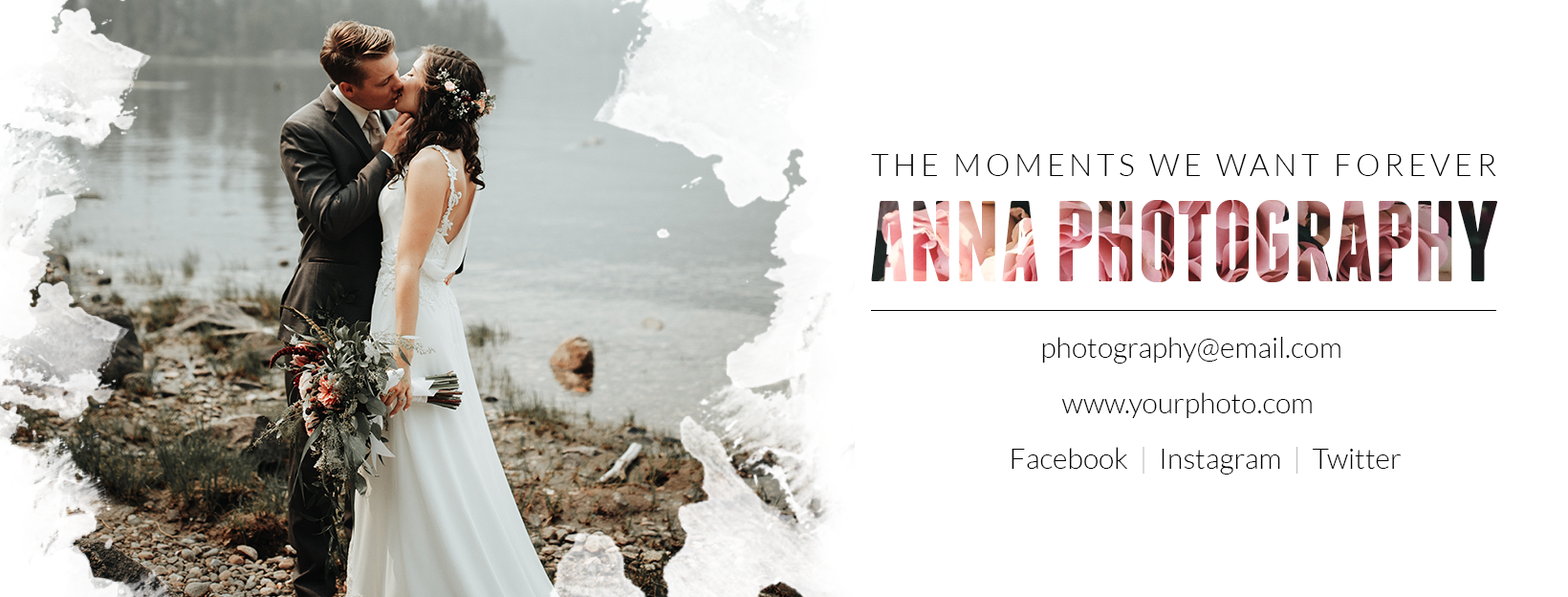
<style>
.page{position:relative;width:1568px;height:597px;background:#ffffff}
.page>*{position:absolute;margin:0}
.t1{font:31.6px "Lato-Light";letter-spacing:0.14em;color:#000000;text-transform:uppercase}
.t2{font:114.7px "Franchise-Bold";text-transform:uppercase}
.t3{font:28.7px "Lato-Light";color:#000000}
.t4{font:28.7px "Lato-Light";color:#c4c4c4}
</style>
<div class="page">
<p class="t1" style="left:871px;top:154px;width:625px;height:22px">The moments we want forever</p>
<p class="t2" style="left:871px;top:200px;width:627px;height:82px">Anna Photography</p>
<p class="t3" style="left:1042px;top:337px;width:298px;height:26px">photography@email.com</p>
<p class="t3" style="left:1061px;top:392px;width:251px;height:26px">www.yourphoto.com</p>
<p class="t3" style="left:1012px;top:446px;width:389px;height:28px">Facebook  <span class="t4">|</span>  Instagram  <span class="t4">|</span>  Twitter</p>
</div>
